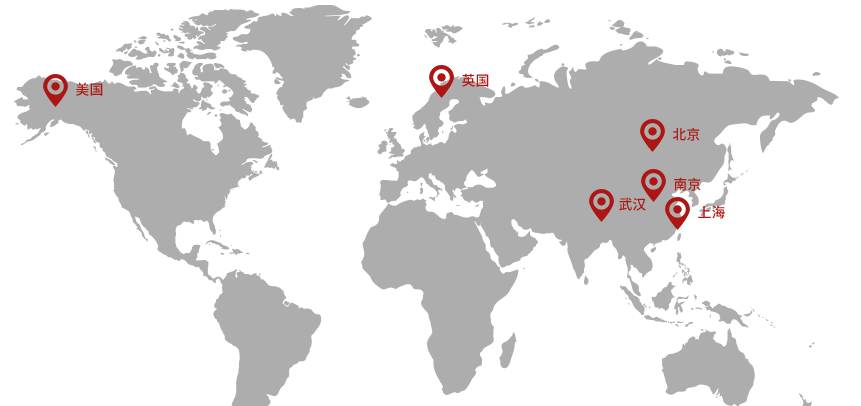
<style>
.page{position:relative;width:861px;height:406px;background:#ffffff}
.page>*{position:absolute;margin:0}
.t1{font:14px "SourceHanSansCN-Medium";color:#ab1a1b}
</style>
<div class="page">
<p class="t1" style="left:462px;top:73px;width:27px;height:14px">英国</p>
<p class="t1" style="left:76px;top:82px;width:27px;height:14px">美国</p>
<p class="t1" style="left:673px;top:127px;width:27px;height:14px">北京</p>
<p class="t1" style="left:674px;top:177px;width:27px;height:14px">南京</p>
<p class="t1" style="left:619px;top:197px;width:27px;height:14px">武汉</p>
<p class="t1" style="left:698px;top:205px;width:27px;height:14px">上海</p>
</div>
